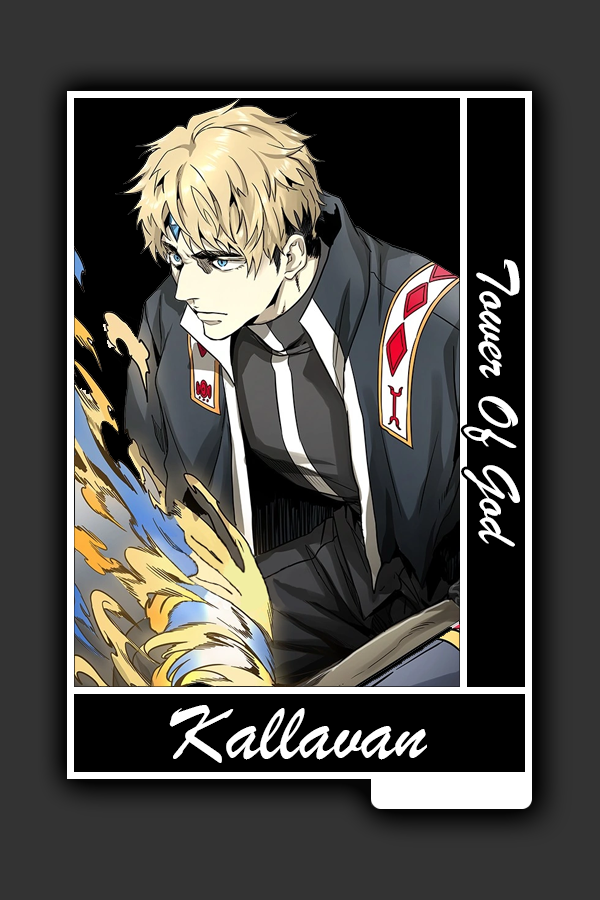
<style>
.page{position:relative;width:600px;height:900px;background:#333333}
.page>*{position:absolute;margin:0}
.t1{font:61.5px "BrushScriptMT";color:#ffffff}
.t2{font:84.8px "BrushScriptMT";color:#ffffff}
</style>
<div class="page">
<p class="t1" style="left:463px;top:259px;width:57px;height:288px;rotate:90deg">Tower Of God</p>
<p class="t2" style="left:169px;top:705px;width:258px;height:58px">Kallavan</p>
</div>
